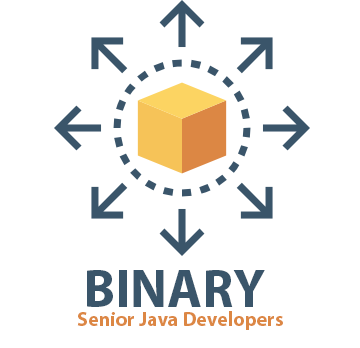
<style>
.page{position:relative;width:360px;height:348px;background:#ffffff}
.page>*{position:absolute;margin:0}
.t1{font:53.3px "MyriadPro-Bold";color:#3a556a}
.t2{font:20px "MyriadPro-Bold";color:#dc8744}
</style>
<div class="page">
<p class="t1" style="left:87px;top:270px;width:178px;height:37px">BINARY</p>
<p class="t2" style="left:77px;top:311px;width:206px;height:19px">Senior Java Developers</p>
</div>
